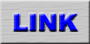
<style>
.page{position:relative;width:90px;height:44px}
.page>*{position:absolute;margin:0}
.t1{font:24px "Arial-Black"}
</style>
<div class="page">
<p class="t1" style="left:13px;top:13px;width:65px;height:18px">LINK</p>
</div>
